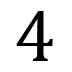
<style>
.page{position:relative;width:72px;height:72px;background:#ffffff}
.page>*{position:absolute;margin:0}
.t1{font:75px "CambriaMath";color:#000000}
</style>
<div class="page">
<p class="t1" style="left:16px;top:11px;width:37px;height:50px">4</p>
</div>
